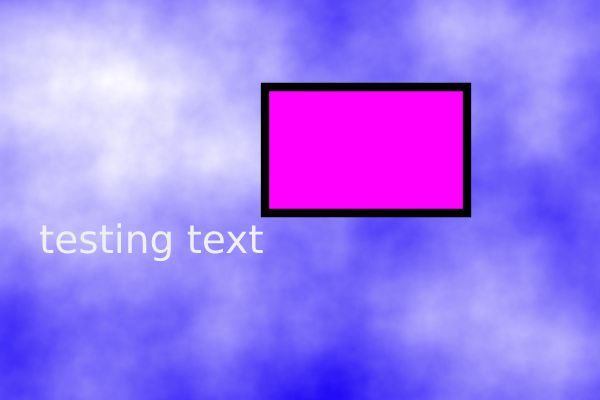
<style>
.page{position:relative;width:600px;height:400px}
.page>*{position:absolute;margin:0}
.t1{font:39px "DejaVuSans";color:#efefef}
</style>
<div class="page">
<p class="t1" style="left:40px;top:223px;width:223px;height:39px">testing text</p>
</div>
